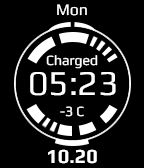
<style>
.page{position:relative;width:144px;height:168px;background:#000000}
.page>*{position:absolute;margin:0}
.t1{font:16px "Play";color:#ffffff}
.t2{font:14px "Play";color:#ffffff}
.t3{font:35px "Play";color:#ffffff}
.t4{font:20px "Play-Bold";color:#ffffff}
</style>
<div class="page">
<p class="t1" style="left:57px;top:4px;width:30px;height:12px">Mon</p>
<p class="t2" style="left:46px;top:55px;width:52px;height:14px">Charged</p>
<p class="t3" style="left:30px;top:72px;width:86px;height:24px">05:23</p>
<p class="t2" style="left:60px;top:106px;width:24px;height:11px">-3 C</p>
<p class="t4" style="left:48px;top:149px;width:49px;height:15px">10.20</p>
</div>
